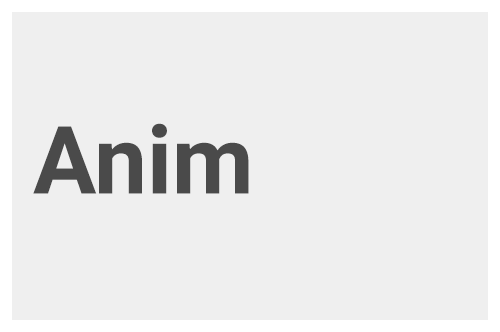
<style>
.page{position:relative;width:500px;height:332px;background:#efefef}
.page>*{position:absolute;margin:0}
.t1{font:94.2px "Roboto-Bold";color:#4a4a4a}
</style>
<div class="page">
<p class="t1" style="left:33px;top:123px;width:216px;height:71px">Anim</p>
</div>
